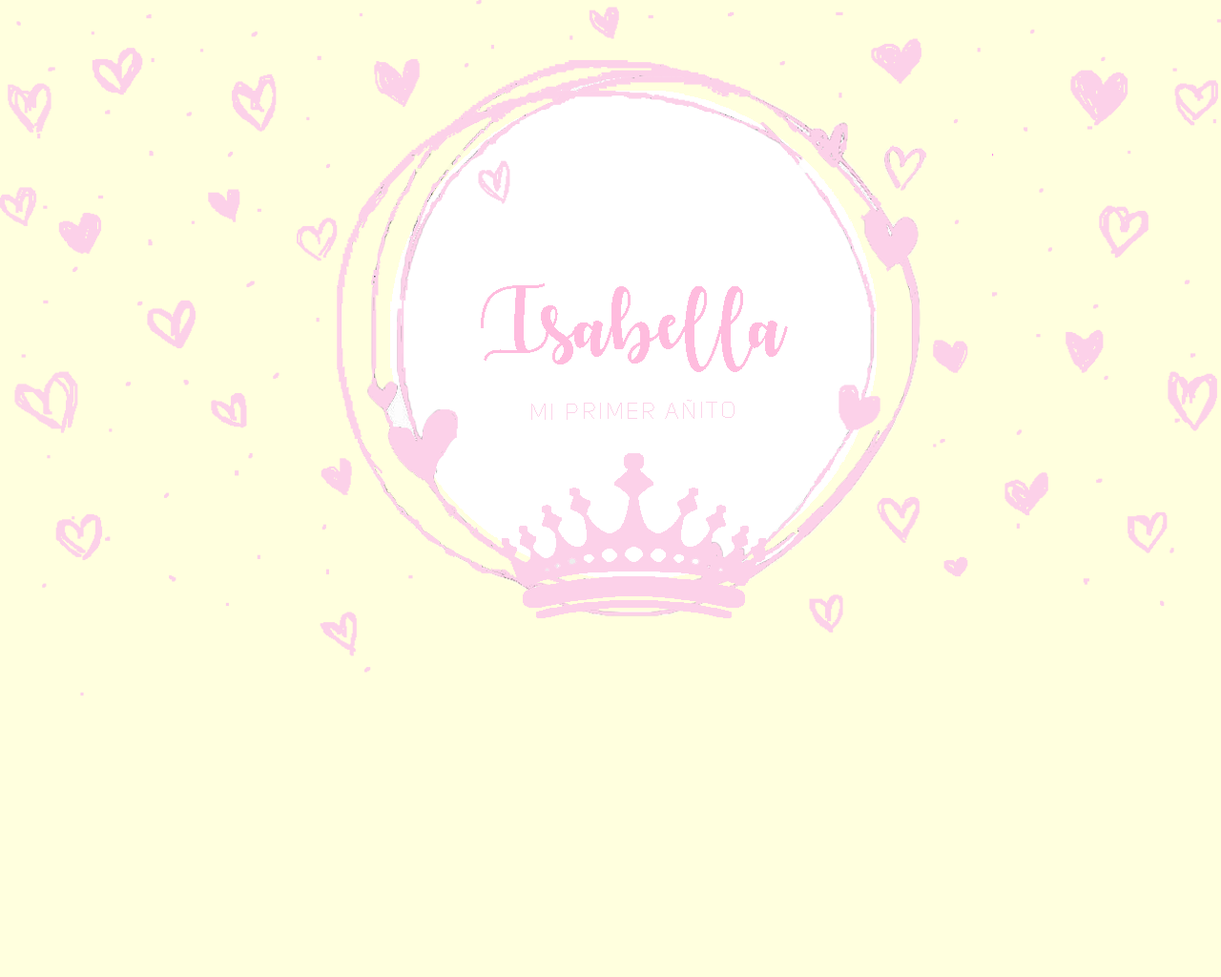
<style>
.page{position:relative;width:1221px;height:977px;background:#ffffde}
.page>*{position:absolute;margin:0}
.t1{font:68.7px "AutumninNovember";letter-spacing:0.025em;color:#ffbcde}
.t2{font:22.9px "UniSansThinCAPS";letter-spacing:0.1em;color:#fcd4e9}
</style>
<div class="page">
<p class="t1" style="left:481px;top:283px;width:307px;height:89px">Isabella</p>
<p class="t2" style="left:531px;top:400px;width:203px;height:20px">Mi Primer Añito</p>
</div>
